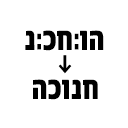
<style>
.page{position:relative;width:128px;height:128px;background:#ffffff}
.page>*{position:absolute;margin:0}
.t1{font:40px "FbAlbatros-Black";color:#000000;scale:0.76 1}
</style>
<div class="page">
<p class="t1" style="left:25px;top:30px;width:79px;height:21px">הו:חכ:נ</p>
<p class="t1" style="left:33px;top:79px;width:65px;height:21px">חנוכה</p>
</div>
